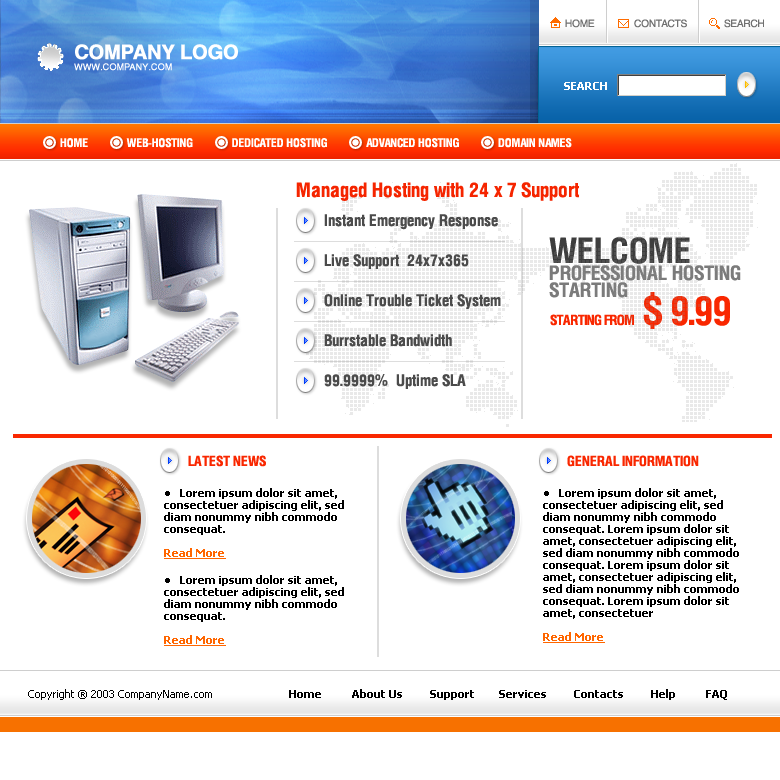
<style>
.page{position:relative;width:780px;height:780px;background:#ffffff}
.page>*{position:absolute;margin:0}
.t1{font:10px "Helios";letter-spacing:-0.02em;color:#707070}
.t2{font:9px "Helios";letter-spacing:-0.02em;color:#ffffff;font-weight:bold}
.t3{font:20px "Helios-Bold";letter-spacing:-0.04em;color:#ffffff;font-weight:bold}
.t4{font:11px "Tahoma-Bold";color:#ffffff}
.t5{font:12px "HeliosCond-Bold";letter-spacing:-0.02em;color:#ffffff}
.t6{font:20px "HeliosCond-Bold";color:#f52500}
.t7{font:16px "HeliosCond-Bold";color:#4b4b4b}
.t8{font:20px/17px "HeliosCond-Bold";color:#7b7b7b}
.t9{font:35px/17px "HeliosCond-Bold";color:#3d3d3d}
.t10{font:14px "HeliosCond-Bold";letter-spacing:-0.04em;color:#f92700}
.t11{font:40px "HeliosCond-Bold";letter-spacing:-0.04em;color:#f92700}
.t12{font:14px "HeliosCond-Bold";color:#f92700}
.t13{font:11px/12px "Tahoma-Bold";color:#000000}
.t14{font:11px/12px "Tahoma";color:#000000}
.t15{font:11px/12px "Tahoma-Bold";color:#ff6600;text-decoration:underline}
.t16{font:11px "Tahoma";color:#000000}
.t17{font:11px "Tahoma-Bold";color:#000000}
</style>
<div class="page">
<p class="t1" style="left:565px;top:19px;width:30px;height:9px">HOME</p>
<p class="t1" style="left:634px;top:19px;width:53px;height:9px">CONTACTS</p>
<p class="t1" style="left:724px;top:19px;width:40px;height:9px">SEARCH</p>
<p class="t2" style="left:74px;top:44px;width:164px;height:27px"><span class="t3">COMPANY LOGO<br></span>WWW.COMPANY.COM</p>
<p class="t4" style="left:564px;top:82px;width:43px;height:8px">SEARCH</p>
<p class="t5" style="left:60px;top:138px;width:512px;height:10px">HOME              WEB-HOSTING              DEDICATED HOSTING              ADVANCED HOSTING              DOMAIN NAMES</p>
<p class="t6" style="left:296px;top:182px;width:283px;height:19px">Managed Hosting with 24 x 7 Support</p>
<p class="t7" style="left:324px;top:214px;width:174px;height:16px">Instant Emergency Response</p>
<p class="t8" style="left:549px;top:237px;width:192px;height:61px"><span class="t9">WELCOME<br></span>PROFESSIONAL HOSTING<br>STARTING</p>
<p class="t7" style="left:324px;top:254px;width:145px;height:15px">Live Support  24x7x365</p>
<p class="t7" style="left:324px;top:294px;width:177px;height:15px">Online Trouble Ticket System</p>
<p class="t10" style="left:550px;top:292px;width:180px;height:37px">STARTING FROM<span class="t11"> $ 9.99</span></p>
<p class="t7" style="left:324px;top:334px;width:128px;height:13px">Burrstable Bandwidth</p>
<p class="t7" style="left:324px;top:374px;width:142px;height:15px">99.9999%  Uptime SLA</p>
<p class="t12" style="left:188px;top:455px;width:78px;height:12px">LATEST NEWS</p>
<p class="t12" style="left:567px;top:455px;width:132px;height:12px">GENERAL INFORMATION</p>
<p class="t13" style="left:164px;top:488px;width:180px;height:71px"><span class="t14">●   </span>Lorem ipsum dolor sit amet, consectetuer adipiscing elit, sed diam nonummy nibh commodo consequat.<br><br><span class="t15">Read More</span></p>
<p class="t13" style="left:543px;top:488px;width:196px;height:155px"><span class="t14">●   </span>Lorem ipsum dolor sit amet, consectetuer adipiscing elit, sed diam nonummy nibh commodo consequat. Lorem ipsum dolor sit amet, consectetuer adipiscing elit, sed diam nonummy nibh commodo consequat. Lorem ipsum dolor sit amet, consectetuer adipiscing elit, sed diam nonummy nibh commodo consequat. Lorem ipsum dolor sit amet, consectetuer<br><br><span class="t15">Read More</span></p>
<p class="t13" style="left:164px;top:575px;width:180px;height:71px"><span class="t14">●   </span>Lorem ipsum dolor sit amet, consectetuer adipiscing elit, sed diam nonummy nibh commodo consequat.<br><br><span class="t15">Read More</span></p>
<p class="t16" style="left:28px;top:689px;width:184px;height:11px">Copyright ® 2003 CompanyName.com</p>
<p class="t17" style="left:289px;top:689px;width:438px;height:11px">Home          About Us         Support        Services         Contacts         Help          FAQ</p>
</div>
